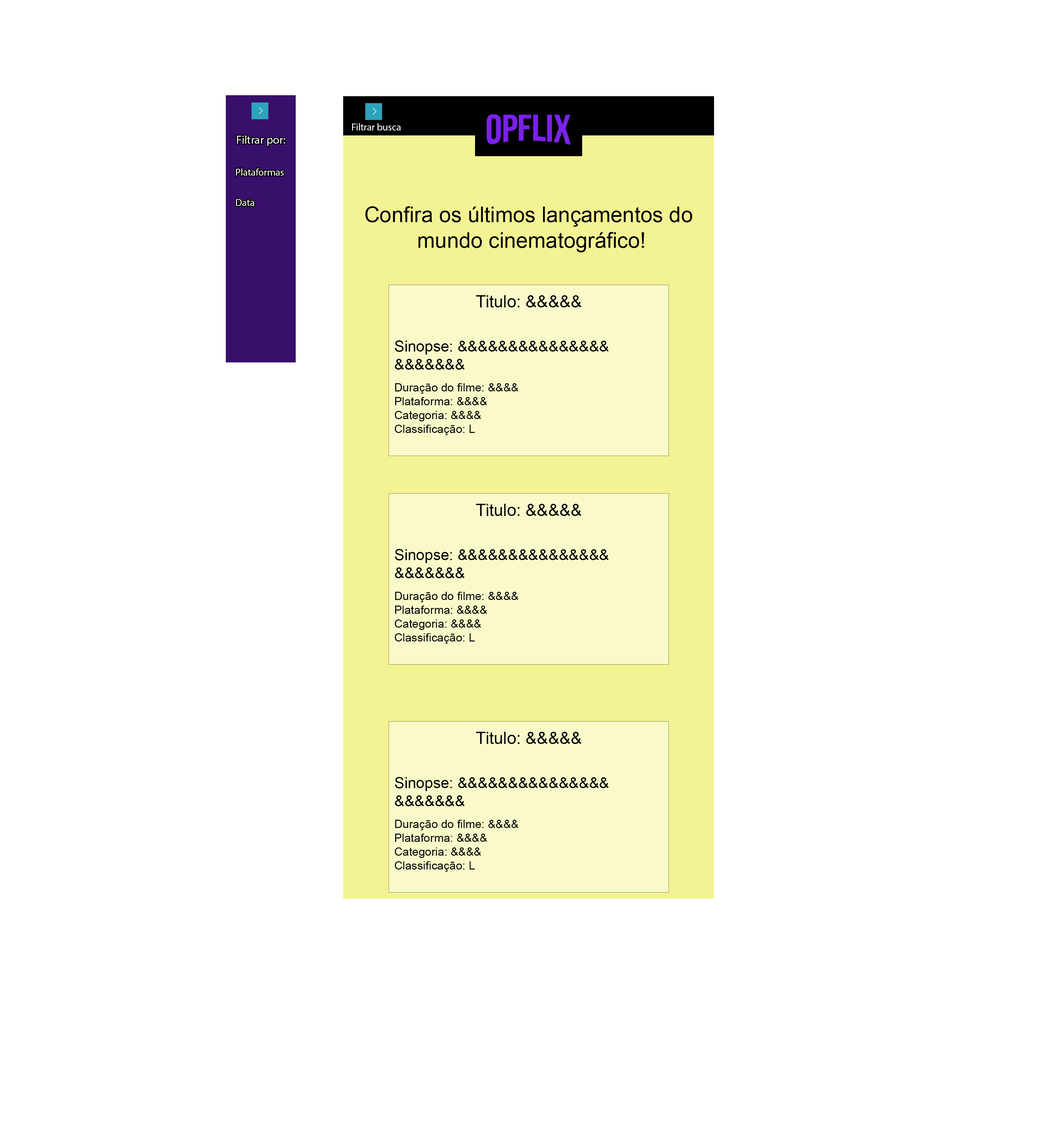
<style>
.page{position:relative;width:1046px;height:1140px;background:#ffffff}
.page>*{position:absolute;margin:0}
.t1{font:9.9px "MyriadPro-Regular";color:#ffffff}
.t2{font:11.5px "MyriadPro-Regular";color:#ffffff}
.t3{font:21.4px "ArialMT";color:#000000}
.t4{font:11.5px "ArialMT";color:#000000}
.t5{font:16.8px "ArialMT";color:#000000}
.t6{font:15.2px "ArialMT";color:#000000}
</style>
<div class="page">
<p class="t1" style="left:352px;top:123px;width:49px;height:8px">Filtrar busca</p>
<p class="t2" style="left:237px;top:135px;width:48px;height:11px">Filtrar por:</p>
<p class="t1" style="left:236px;top:168px;width:48px;height:8px">Plataformas</p>
<p class="t1" style="left:236px;top:199px;width:18px;height:7px">Data</p>
<p class="t3" style="left:365px;top:206px;width:327px;height:46px;text-align:center">Confira os últimos lançamentos do <br>mundo cinematográfico!</p>
<p class="t4" style="left:394px;top:295px;width:215px;height:140px;text-align:center"><span class="t5">Titulo: &amp;&amp;&amp;&amp;&amp;<br><br><br></span><span class="t6">Sinopse: &amp;&amp;&amp;&amp;&amp;&amp;&amp;&amp;&amp;&amp;&amp;&amp;&amp;&amp;&amp;<br>&amp;&amp;&amp;&amp;&amp;&amp;&amp;<br><br></span>Duração do filme: &amp;&amp;&amp;&amp;<br>Plataforma: &amp;&amp;&amp;&amp;<br>Categoria: &amp;&amp;&amp;&amp;<br>Classificação: L</p>
<p class="t4" style="left:394px;top:504px;width:215px;height:140px;text-align:center"><span class="t5">Titulo: &amp;&amp;&amp;&amp;&amp;<br><br><br></span><span class="t6">Sinopse: &amp;&amp;&amp;&amp;&amp;&amp;&amp;&amp;&amp;&amp;&amp;&amp;&amp;&amp;&amp;<br>&amp;&amp;&amp;&amp;&amp;&amp;&amp;<br><br></span>Duração do filme: &amp;&amp;&amp;&amp;<br>Plataforma: &amp;&amp;&amp;&amp;<br>Categoria: &amp;&amp;&amp;&amp;<br>Classificação: L</p>
<p class="t4" style="left:394px;top:732px;width:215px;height:140px;text-align:center"><span class="t5">Titulo: &amp;&amp;&amp;&amp;&amp;<br><br><br></span><span class="t6">Sinopse: &amp;&amp;&amp;&amp;&amp;&amp;&amp;&amp;&amp;&amp;&amp;&amp;&amp;&amp;&amp;<br>&amp;&amp;&amp;&amp;&amp;&amp;&amp;<br><br></span>Duração do filme: &amp;&amp;&amp;&amp;<br>Plataforma: &amp;&amp;&amp;&amp;<br>Categoria: &amp;&amp;&amp;&amp;<br>Classificação: L</p>
</div>
